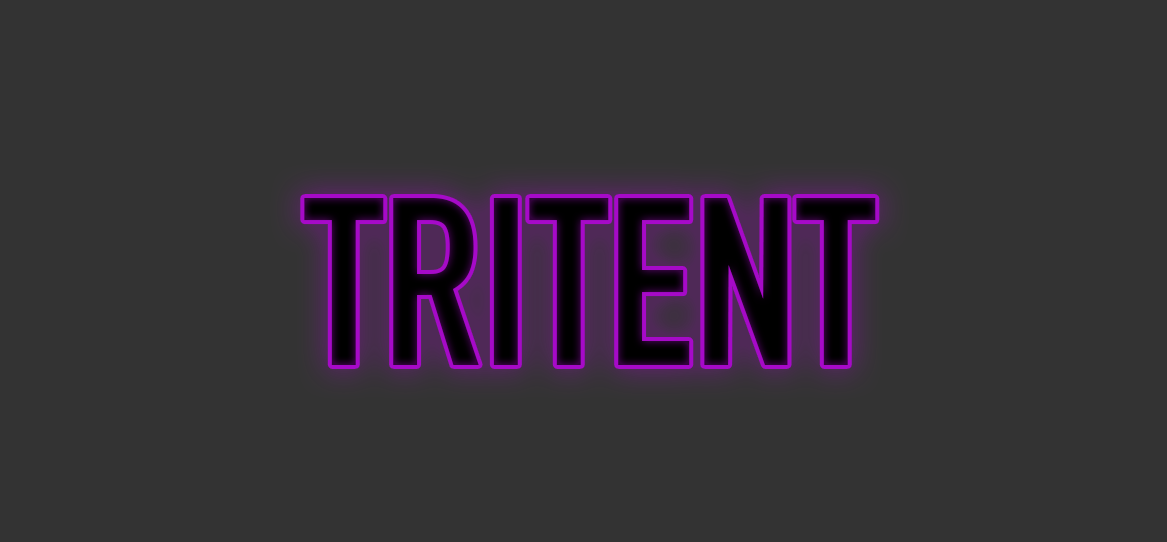
<style>
.page{position:relative;width:1167px;height:542px;background:#333333}
.page>*{position:absolute;margin:0}
.t1{font:233.7px "DINEngschrift";color:#070009}
</style>
<div class="page">
<p class="t1" style="left:304px;top:198px;width:572px;height:167px">TRITENT</p>
</div>
